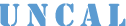
<style>
.page{position:relative;width:126px;height:26px;background:#ffffff}
.page>*{position:absolute;margin:0}
.t1{font:30px "StencilStd";letter-spacing:0.2em;color:#5b9bd1}
</style>
<div class="page">
<p class="t1" style="left:0px;top:3px;width:126px;height:24px">unCAL</p>
</div>
